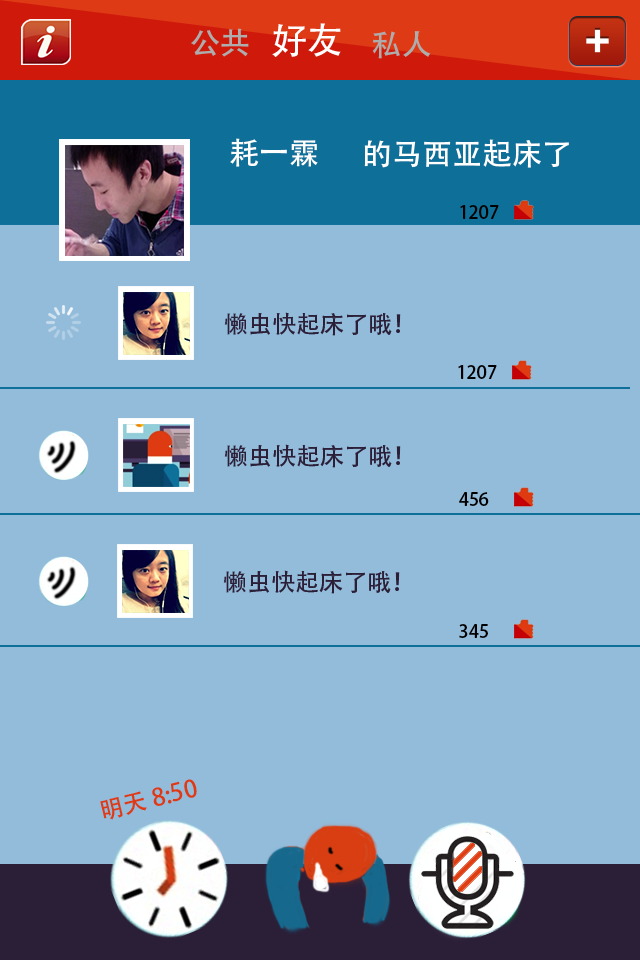
<style>
.page{position:relative;width:640px;height:960px;background:#93bcdb}
.page>*{position:absolute;margin:0}
.t1{font:30px "AdobeHeitiStd-Regular";color:#adadad}
.t2{font:36px "AdobeHeitiStd-Regular";color:#ffffff}
.t3{font:30px "AdobeHeitiStd-Regular";color:#ffffff}
.t4{font:18px "AdobeHeitiStd-Regular";color:#000000}
.t5{font:24px "AdobeHeitiStd-Regular";color:#de3a15}
</style>
<div class="page">
<p class="t1" style="left:191px;top:28px;width:58px;height:29px">公共</p>
<p class="t2" style="left:272px;top:23px;width:69px;height:34px">好友</p>
<p class="t1" style="left:372px;top:31px;width:59px;height:28px">私人</p>
<p class="t3" style="left:230px;top:138px;width:88px;height:29px">耗一霖</p>
<p class="t3" style="left:364px;top:139px;width:205px;height:29px">的马西亚起床了</p>
<p class="t4" style="left:460px;top:205px;width:39px;height:14px">1207</p>
<p class="t4" style="left:458px;top:365px;width:39px;height:14px">1207</p>
<p class="t4" style="left:459px;top:492px;width:30px;height:14px">456</p>
<p class="t4" style="left:459px;top:624px;width:29px;height:14px">345</p>
<p class="t5" style="left:100px;top:779px;width:97px;height:41px;rotate:-14deg">明天 8:50</p>
</div>
